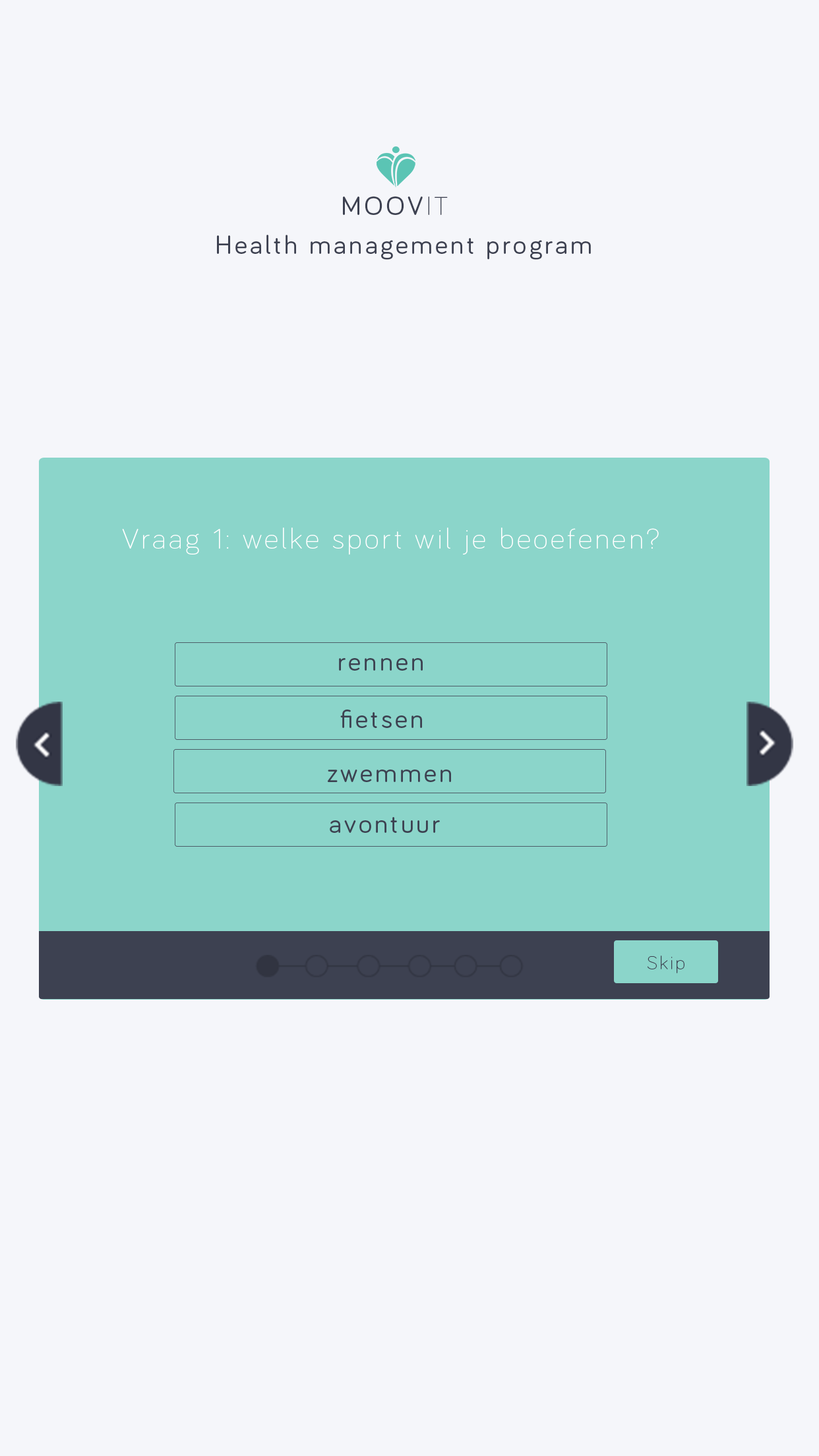
<style>
.page{position:relative;width:819px;height:1456px;background:#f5f6fa}
.page>*{position:absolute;margin:0}
.t1{font:26.9px "Bariol-Regular";letter-spacing:0.1em;color:#3d4151}
.t2{font:26.9px "Bariol-Light";letter-spacing:0.1em;color:#3d4151}
.t3{font:29.3px "Bariol-Light";letter-spacing:0.1em;color:#ffffff}
.t4{font:19.5px "Bariol-Light";letter-spacing:0.1em;color:#3d4151}
</style>
<div class="page">
<p class="t1" style="left:343px;top:197px;width:105px;height:18px">MOOV<span class="t2">IT</span></p>
<p class="t1" style="left:217px;top:235px;width:374px;height:25px">Health management program</p>
<p class="t3" style="left:122px;top:528px;width:537px;height:27px">Vraag 1: welke sport wil je beoefenen?</p>
<p class="t1" style="left:339px;top:658px;width:84px;height:13px">rennen</p>
<p class="t1" style="left:340px;top:710px;width:82px;height:18px">fietsen</p>
<p class="t1" style="left:327px;top:770px;width:124px;height:12px">zwemmen</p>
<p class="t1" style="left:330px;top:817px;width:110px;height:16px">avontuur</p>
<p class="t4" style="left:647px;top:955px;width:37px;height:18px">Skip</p>
</div>
